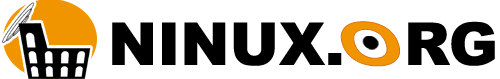
<style>
.page{position:relative;width:500px;height:79px;background:#ffffff}
.page>*{position:absolute;margin:0}
.t1{font:59.2px "Arial-Black";color:#000000}
.t2{font:62.2px "Arial-BoldMT";color:#f09400;scale:1.29 1}
</style>
<div class="page">
<p class="t1" style="left:112px;top:21px;width:383px;height:45px">NINUX.   RG</p>
<p class="t2" style="left:341px;top:21px;width:59px;height:45px">O</p>
</div>
